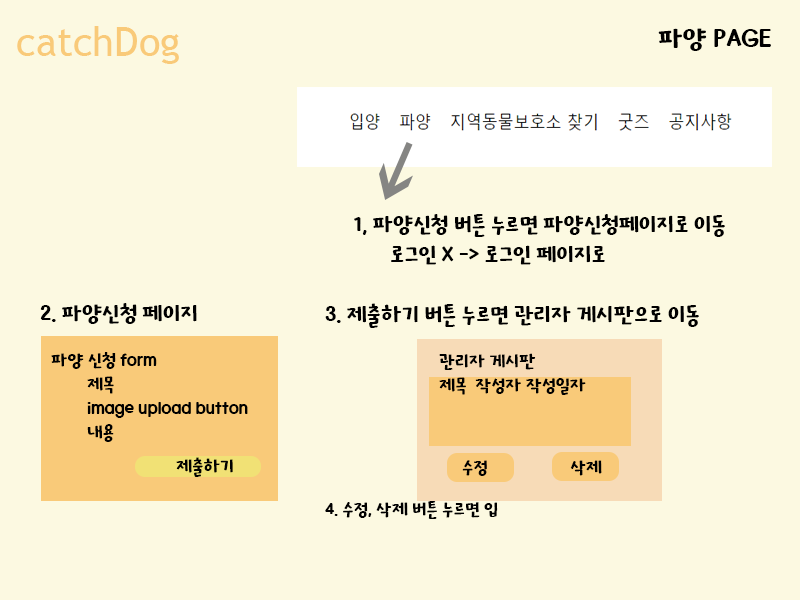
<style>
.page{position:relative;width:800px;height:600px;background:#fcf9e1}
.page>*{position:absolute;margin:0}
.t1{font:40.2px "TrebuchetMS";color:#f9ca79}
.t2{font:29.8px "KOTRA-HOPE";color:#000000}
.t3{font:25px "KOTRA-HOPE";color:#000000}
.t4{font:24.8px "KOTRA-HOPE";color:#000000}
.t5{font:20px "KOTRA-HOPE";color:#000000}
.t6{font:19.9px "KOTRA-HOPE";color:#000000}
.t7{font:19.8px "KOTRA-HOPE";color:#000000}
.t8{font:20.1px "KOTRA-HOPE";color:#000000}
</style>
<div class="page">
<p class="t1" style="left:17px;top:26px;width:162px;height:38px">catchDog</p>
<p class="t2" style="left:658px;top:28px;width:113px;height:23px">파양 PAGE</p>
<p class="t3" style="left:354px;top:214px;width:371px;height:51px">1, 파양신청 버튼 누르면 파양신청페이지로 이동<br> 로그인 X -&gt; 로그인 페이지로</p>
<p class="t4" style="left:40px;top:303px;width:157px;height:21px">2. 파양신청 페이지</p>
<p class="t4" style="left:325px;top:303px;width:374px;height:25px">3. 제출하기 버튼 누르면 관리자 게시판으로 이동</p>
<p class="t5" style="left:51px;top:352px;width:197px;height:90px">파양 신청 form<br> 제목<br> image upload button<br> 내용</p>
<p class="t6" style="left:439px;top:353px;width:147px;height:42px">관리자 게시판<br>제목  작성자 작성일자</p>
<p class="t6" style="left:176px;top:457px;width:57px;height:20px">제출하기</p>
<p class="t7" style="left:462px;top:460px;width:140px;height:16px">수정    삭제</p>
<p class="t8" style="left:325px;top:501px;width:173px;height:18px">4. 수정, 삭제 버튼 누르면 입</p>
</div>
